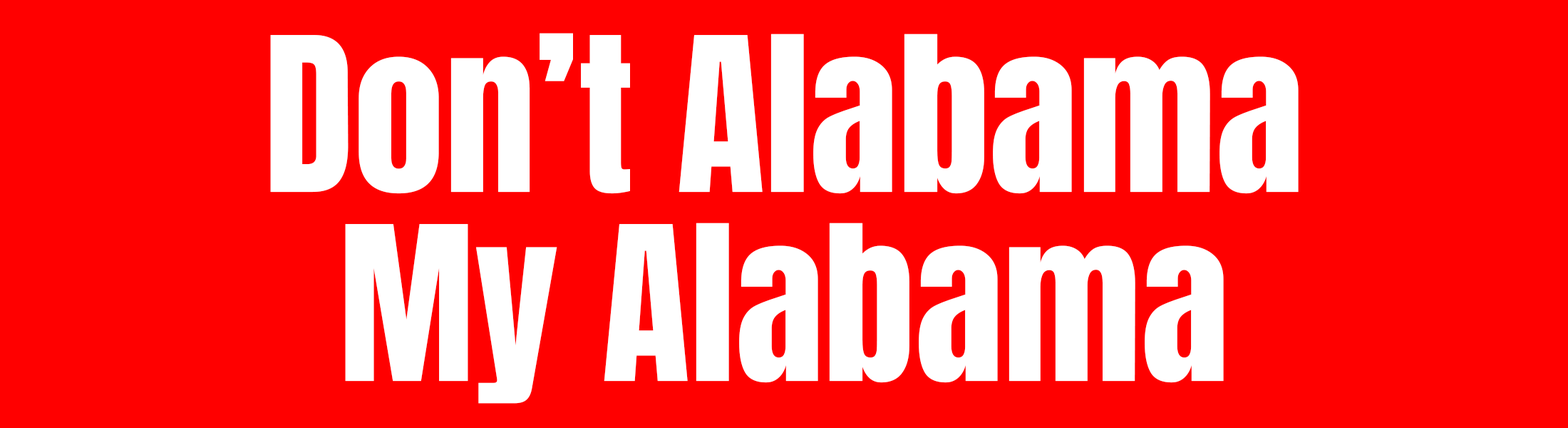
<style>
.page{position:relative;width:1568px;height:428px;background:#ff0000}
.page>*{position:absolute;margin:0}
.t1{font:182.5px "Anton-Regular";color:#ffffff}
</style>
<div class="page">
<p class="t1" style="left:270px;top:33px;width:1029px;height:161px">Don’t Alabama</p>
<p class="t1" style="left:345px;top:222px;width:879px;height:181px">My Alabama</p>
</div>
